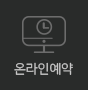
<style>
.page{position:relative;width:88px;height:90px;background:#292b2a}
.page>*{position:absolute;margin:0}
.t1{font:13px "NanumSquareR";color:#c7c7c7}
</style>
<div class="page">
<p class="t1" style="left:14px;top:62px;width:59px;height:13px">온라인예약</p>
</div>
